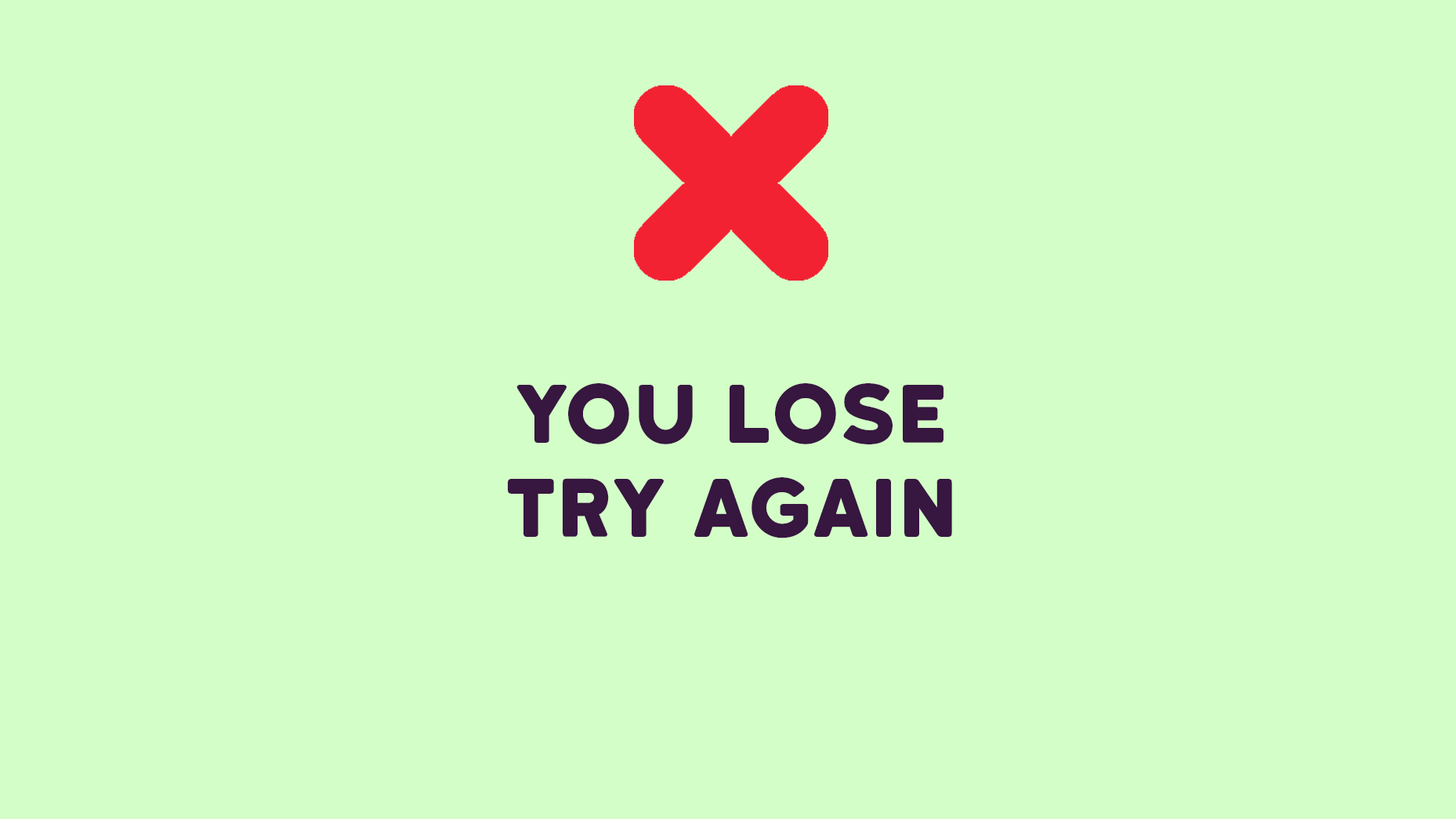
<style>
.page{position:relative;width:1456px;height:819px;background:#d4fec8}
.page>*{position:absolute;margin:0}
.t1{font:78.4px "KatahdinRound-Regular";color:#371640}
</style>
<div class="page">
<p class="t1" style="left:508px;top:383px;width:444px;height:155px;text-align:center">You lose<br>Try again</p>
</div>
